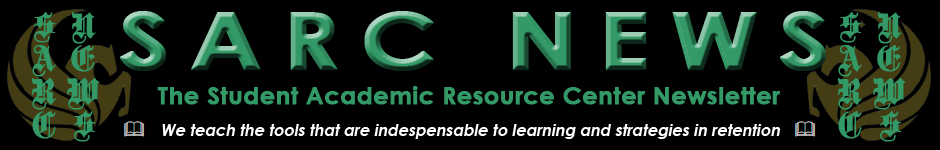
<style>
.page{position:relative;width:940px;height:150px;background:#000000}
.page>*{position:absolute;margin:0}
.t1{font:24px "CenturyGothic-Bold";color:#339966;font-weight:bold}
.t2{font:16px "CenturyGothic-Bold";color:#ffffff;font-style:italic}
</style>
<div class="page">
<p class="t1" style="left:157px;top:86px;width:624px;height:19px">The Student Academic Resource Center Newsletter</p>
<p class="t2" style="left:162px;top:124px;width:619px;height:15px">We teach the tools that are indespensable to learning and strategies in retention</p>
</div>
